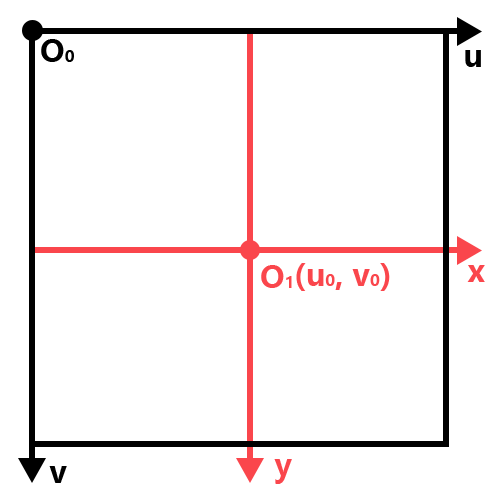
<style>
.page{position:relative;width:500px;height:500px;background:#ffffff}
.page>*{position:absolute;margin:0}
.t1{font:30px "MicrosoftYaHei-Bold";color:#000000}
.t2{font:16px "MicrosoftYaHei-Bold";color:#000000}
.t3{font:30px "MicrosoftYaHei-Bold";color:#fa464c}
.t4{font:16px "MicrosoftYaHei-Bold";color:#fa464c}
</style>
<div class="page">
<p class="t1" style="left:41px;top:39px;width:33px;height:23px">O<span class="t2">0</span></p>
<p class="t1" style="left:465px;top:50px;width:16px;height:17px">u</p>
<p class="t3" style="left:261px;top:265px;width:31px;height:23px">O<span class="t4">1</span></p>
<p class="t3" style="left:296px;top:263px;width:94px;height:28px">(u<span class="t4">0</span>, v<span class="t4">0</span>)</p>
<p class="t3" style="left:467px;top:265px;width:18px;height:17px">x</p>
<p class="t3" style="left:274px;top:459px;width:18px;height:25px">y</p>
<p class="t1" style="left:49px;top:466px;width:18px;height:17px">v</p>
</div>
